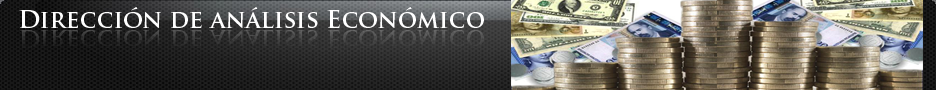
<style>
.page{position:relative;width:936px;height:90px}
.page>*{position:absolute;margin:0}
.t1{font:24px "TrajanPro-Bold";color:#ffffff}
</style>
<div class="page">
<p class="t1" style="left:19px;top:7px;width:465px;height:22px">Dirección de análisis Económico</p>
</div>
